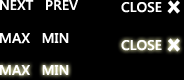
<style>
.page{position:relative;width:184px;height:80px;background:#000000}
.page>*{position:absolute;margin:0}
.t1{font:14px "SegoeUI-SemiBold";color:#ffffff}
.t2{font:14px "SegoeUI-SemiBold";color:#fefefe}
</style>
<div class="page">
<p class="t1" style="left:0px;top:0px;width:78px;height:10px">NEXT   PREV</p>
<p class="t1" style="left:121px;top:2px;width:41px;height:11px">CLOSE</p>
<p class="t1" style="left:0px;top:33px;width:69px;height:11px">MAX   MIN</p>
<p class="t1" style="left:121px;top:40px;width:41px;height:11px">CLOSE</p>
<p class="t2" style="left:0px;top:65px;width:69px;height:11px">MAX   MIN</p>
</div>
